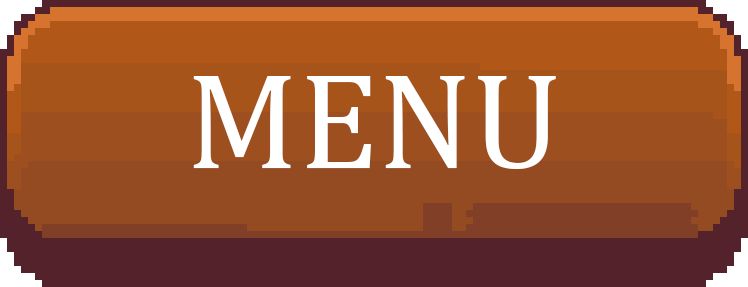
<style>
.page{position:relative;width:748px;height:287px;background:#54222a}
.page>*{position:absolute;margin:0}
.t1{font:138px "Cambria";color:#ffffff}
</style>
<div class="page">
<p class="t1" style="left:193px;top:76px;width:363px;height:93px">MENU</p>
</div>
